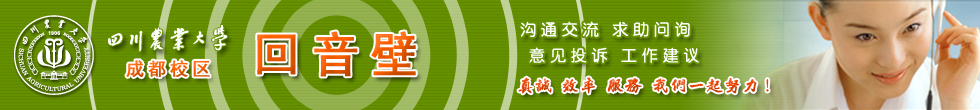
<style>
.page{position:relative;width:980px;height:110px}
.page>*{position:absolute;margin:0}
.t1{font:16px/26px "FZY3K--GBK1-0";letter-spacing:0.3em;color:#ffffff}
.t2{font:48px "SimHei";letter-spacing:0.2em;font-weight:bold}
.t3{font:18px "SimHei";letter-spacing:0.2em;font-weight:bold}
.t4{font:18px "By-JOSSQ-DMF-in-BeiJing"}
</style>
<div class="page">
<p class="t1" style="left:520px;top:21px;width:179px;height:42px">沟通交流 求助问询<br> 意见投诉 工作建议</p>
<p class="t2" style="left:257px;top:31px;width:159px;height:46px">回音壁</p>
<p class="t3" style="left:126px;top:60px;width:84px;height:18px">成都校区</p>
<p class="t4" style="left:518px;top:77px;width:251px;height:17px">真诚 效率 服务 我们一起努力！</p>
</div>
